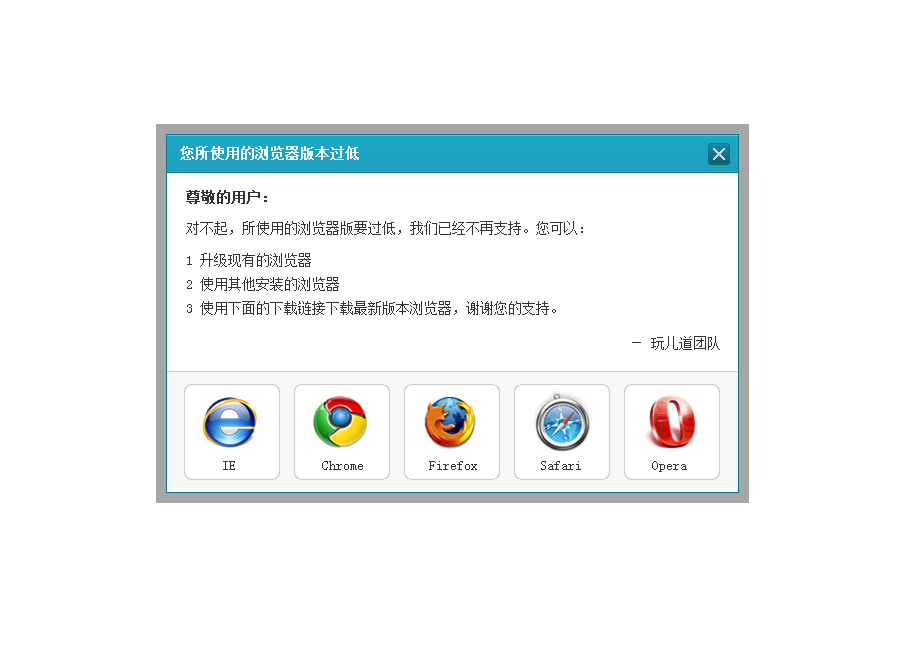
<style>
.page{position:relative;width:904px;height:657px;background:#ffffff}
.page>*{position:absolute;margin:0}
.t1{font:14px "SimSun";color:#eef7fe;font-weight:bold}
.t2{font:14px "SimSun";color:#333333;font-weight:bold}
.t3{font:14px "SimSun";color:#333333}
.t4{font:14px/24px "SimSun";color:#333333}
</style>
<div class="page">
<p class="t1" style="left:180px;top:146px;width:179px;height:14px">您所使用的浏览器版本过低</p>
<p class="t2" style="left:186px;top:190px;width:81px;height:14px">尊敬的用户：</p>
<p class="t3" style="left:186px;top:221px;width:397px;height:14px">对不起，所使用的浏览器版要过低，我们已经不再支持。您可以：</p>
<p class="t4" style="left:187px;top:253px;width:369px;height:62px">1 升级现有的浏览器<br>2 使用其他安装的浏览器<br>3 使用下面的下载链接下载最新版本浏览器，谢谢您的支持。</p>
<p class="t3" style="left:632px;top:336px;width:88px;height:14px">－ 玩儿道团队</p>
<p class="t3" style="left:223px;top:461px;width:12px;height:9px">IE</p>
<p class="t3" style="left:322px;top:461px;width:41px;height:9px">Chrome</p>
<p class="t3" style="left:429px;top:461px;width:48px;height:9px">Firefox</p>
<p class="t3" style="left:541px;top:461px;width:40px;height:9px">Safari</p>
<p class="t3" style="left:652px;top:461px;width:35px;height:11px">Opera</p>
</div>
